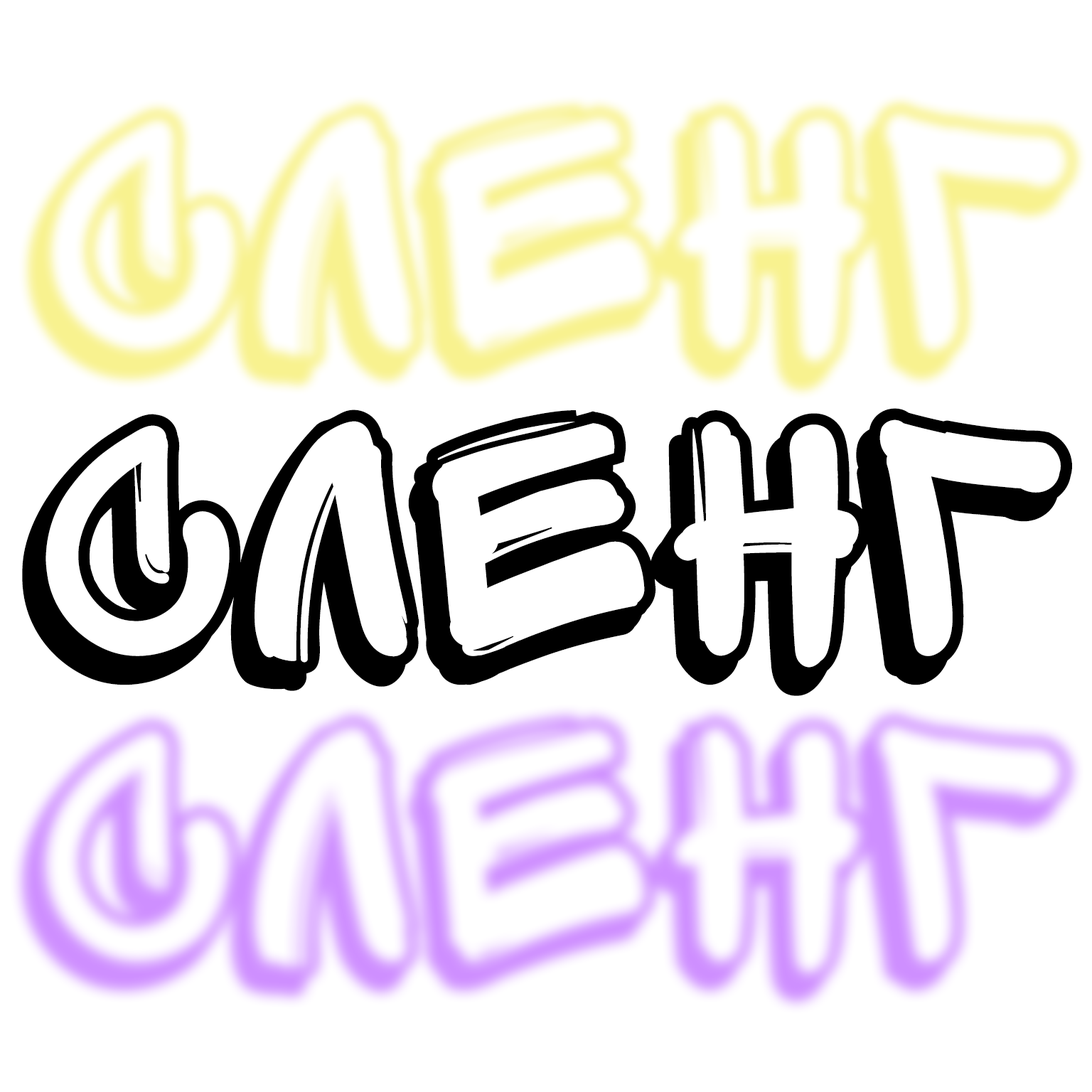
<style>
.page{position:relative;width:1092px;height:1092px;background:#ffffff}
.page>*{position:absolute;margin:0}
.t1{font:355.5px "SpriteGraffitiShadow";color:#000000}
</style>
<div class="page">
<p class="t1" style="left:22px;top:408px;width:1050px;height:288px">СЛеНГ</p>
<p class="t1" style="left:22px;top:408px;width:1050px;height:288px">СЛеНГ</p>
</div>
